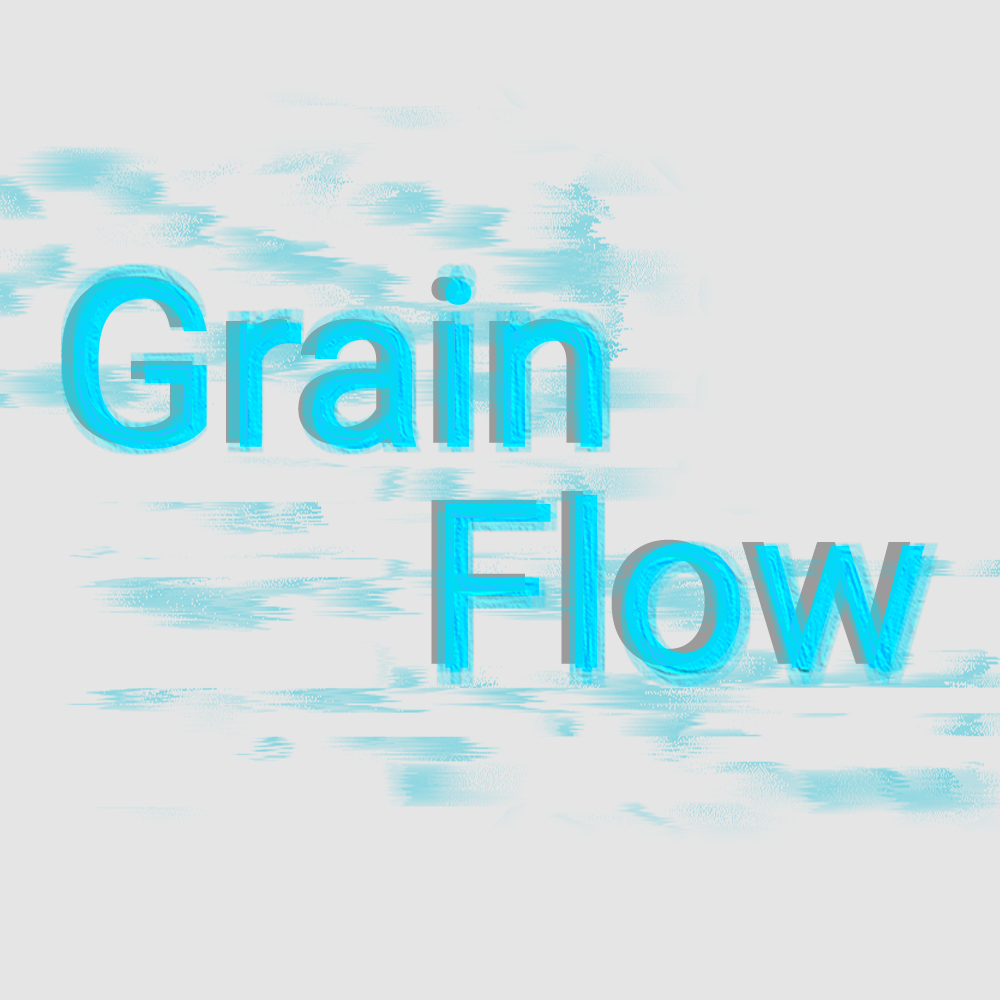
<style>
.page{position:relative;width:1000px;height:1000px;background:#e5e5e5}
.page>*{position:absolute;margin:0}
.t1{font:230.2px "Roboto-Regular";scale:1.03 1}
.t2{font:230.2px "Roboto-Regular";color:#00d8ff;scale:1.03 1}
</style>
<div class="page">
<p class="t1" style="left:62px;top:276px;width:527px;height:169px">Grain</p>
<p class="t2" style="left:76px;top:280px;width:527px;height:169px">Grain</p>
<p class="t1" style="left:431px;top:491px;width:480px;height:175px">Flow</p>
<p class="t2" style="left:445px;top:495px;width:480px;height:175px">Flow</p>
</div>
